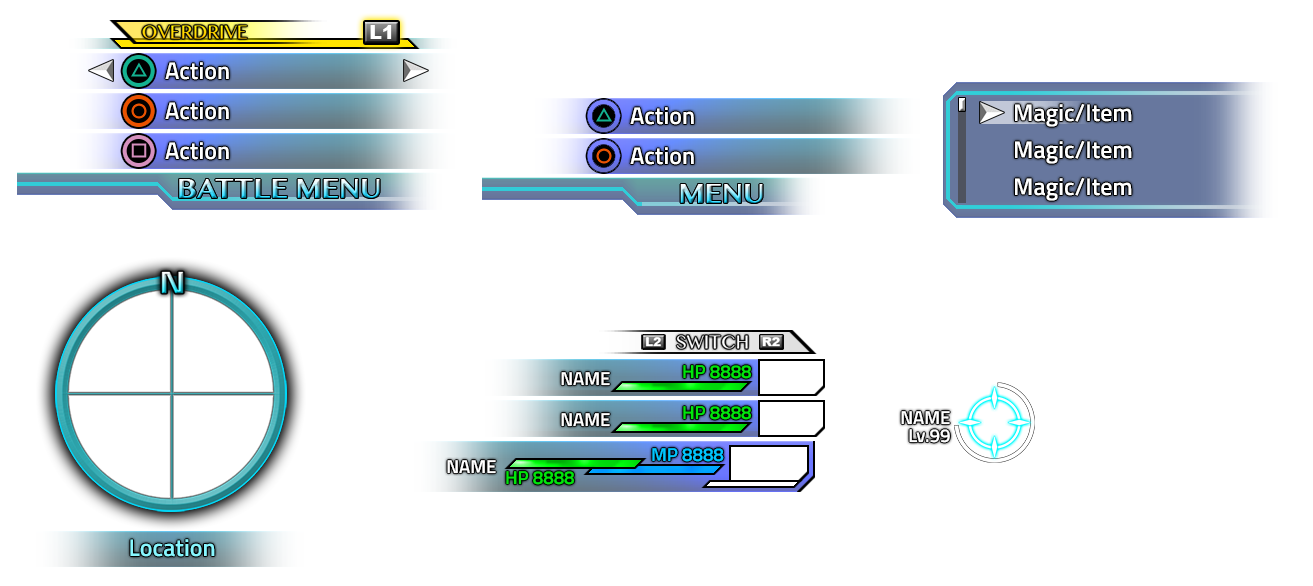
<style>
.page{position:relative;width:1313px;height:586px;background:#ffffff}
.page>*{position:absolute;margin:0}
.t1{font:24px "TitilliumWeb-SemiBold";color:#ffffff}
.t2{font:18.7px "TitilliumWeb-SemiBold";color:#01e60c}
.t3{font:18.7px "TitilliumWeb-SemiBold";color:#ffffff}
.t4{font:18.7px "TitilliumWeb-SemiBold";color:#00c6ff}
.t5{font:24px "TitilliumWeb-SemiBold";color:#88f7ff}
</style>
<div class="page">
<p class="t1" style="left:165px;top:62px;width:64px;height:18px">Action</p>
<p class="t1" style="left:165px;top:102px;width:64px;height:18px">Action</p>
<p class="t1" style="left:630px;top:107px;width:64px;height:18px">Action</p>
<p class="t1" style="left:1015px;top:103px;width:117px;height:24px">Magic/Item</p>
<p class="t1" style="left:165px;top:142px;width:64px;height:18px">Action</p>
<p class="t1" style="left:630px;top:147px;width:64px;height:18px">Action</p>
<p class="t1" style="left:1015px;top:140px;width:117px;height:24px">Magic/Item</p>
<p class="t1" style="left:1015px;top:177px;width:117px;height:24px">Magic/Item</p>
<p class="t2" style="left:683px;top:365px;width:69px;height:14px">HP 8888</p>
<p class="t3" style="left:561px;top:372px;width:49px;height:14px">NAME</p>
<p class="t3" style="left:561px;top:413px;width:49px;height:14px">NAME</p>
<p class="t2" style="left:683px;top:406px;width:69px;height:14px">HP 8888</p>
<p class="t3" style="left:901px;top:411px;width:49px;height:14px">NAME</p>
<p class="t3" style="left:909px;top:429px;width:41px;height:14px">Lv.99</p>
<p class="t4" style="left:652px;top:448px;width:72px;height:14px">MP 8888</p>
<p class="t3" style="left:447px;top:460px;width:49px;height:14px">NAME</p>
<p class="t2" style="left:506px;top:471px;width:69px;height:14px">HP 8888</p>
<p class="t5" style="left:130px;top:539px;width:85px;height:18px">Location</p>
</div>
